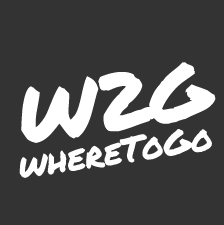
<style>
.page{position:relative;width:224px;height:225px;background:#333333}
.page>*{position:absolute;margin:0}
.t1{font:80px "PermanentMarker-Regular";color:#ffffff}
.t2{font:35px "PermanentMarker-Regular";color:#fefefe}
</style>
<div class="page">
<p class="t1" style="left:21px;top:62px;width:195px;height:81px;rotate:-9deg">W2G</p>
<p class="t2" style="left:19px;top:129px;width:193px;height:49px;rotate:-9deg">whereToGo</p>
</div>
